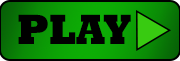
<style>
.page{position:relative;width:180px;height:61px;background:#000000}
.page>*{position:absolute;margin:0}
.t1{font:43.2px "Rockwell-ExtraBold";color:#000000;scale:0.9 1}
</style>
<div class="page">
<p class="t1" style="left:18px;top:14px;width:113px;height:30px">PLAY</p>
</div>
